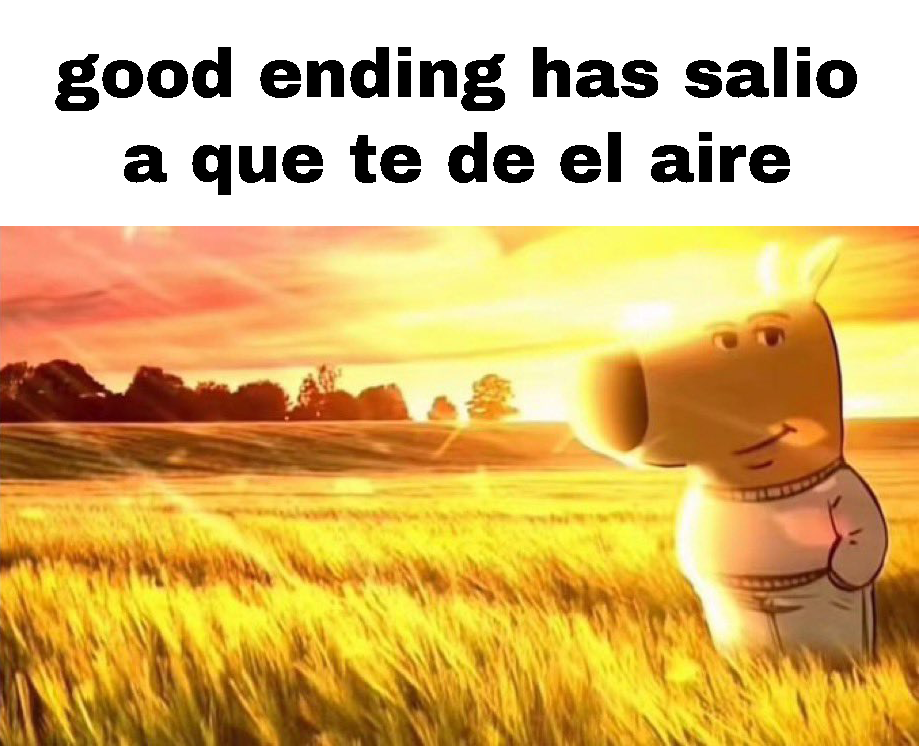
<style>
.page{position:relative;width:919px;height:746px;background:#ffffff}
.page>*{position:absolute;margin:0}
.t1{font:67.6px/59.4px "ArchivoBlack-Regular";color:#000000}
</style>
<div class="page">
<p class="t1" style="left:55px;top:47px;width:802px;height:148px;text-align:center">good ending has salio<br>a que te de el aire</p>
</div>
